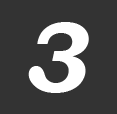
<style>
.page{position:relative;width:117px;height:114px;background:#333333}
.page>*{position:absolute;margin:0}
.t1{font:100px "BookmanOldStyle-BoldItalic";color:#ffffff}
</style>
<div class="page">
<p class="t1" style="left:28px;top:22px;width:61px;height:71px">3</p>
</div>
